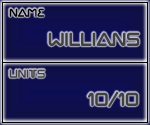
<style>
.page{position:relative;width:150px;height:125px}
.page>*{position:absolute;margin:0}
.t1{font:12px "Chilopod-Regular";color:#000000}
.t2{font:20px "Chilopod-Regular";color:#404040}
.t3{font:12px "Chilopod-Regular";color:#404040}
</style>
<div class="page">
<p class="t1" style="left:9px;top:8px;width:35px;height:9px">NAME</p>
<p class="t2" style="left:48px;top:32px;width:92px;height:14px">Willians</p>
<p class="t3" style="left:9px;top:69px;width:36px;height:9px">Units</p>
<p class="t2" style="left:88px;top:91px;width:51px;height:16px">10/10</p>
</div>
